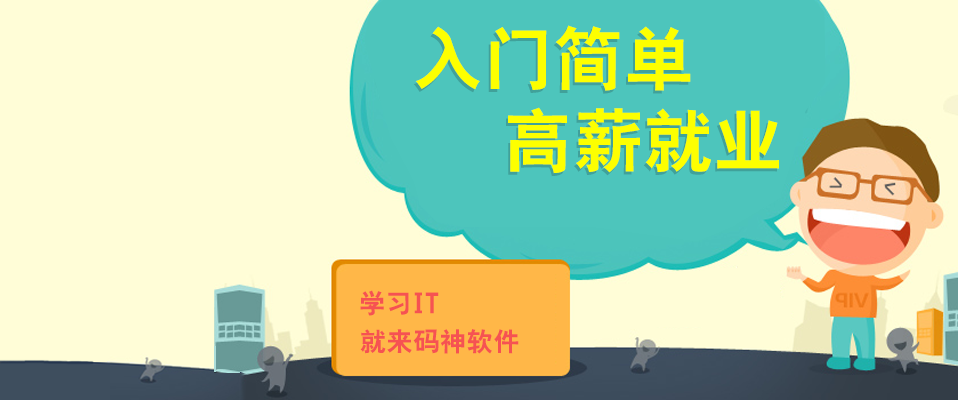
<style>
.page{position:relative;width:958px;height:400px;background:#fffdd7}
.page>*{position:absolute;margin:0}
.t1{font:69px/81.6px "HeitiCSEG";letter-spacing:0.02em;color:#fdff00}
.t2{font:26px "HeitiCSEG";letter-spacing:0.02em;color:#f65252}
</style>
<div class="page">
<p class="t1" style="left:415px;top:25px;width:364px;height:149px;text-align:center">入门简单<br>     高薪就业</p>
<p class="t2" style="left:360px;top:290px;width:79px;height:26px">学习IT</p>
<p class="t2" style="left:360px;top:329px;width:159px;height:25px">就来码神软件</p>
</div>
